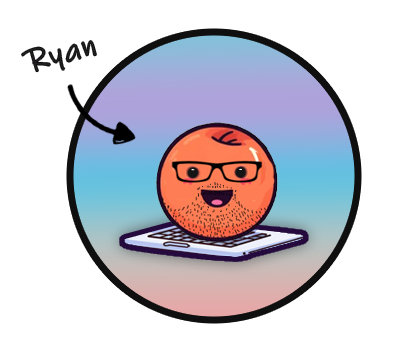
<style>
.page{position:relative;width:413px;height:352px;background:#ffffff}
.page>*{position:absolute;margin:0}
.t1{font:30.7px "InkFree";letter-spacing:0.06em;color:#211f21}
</style>
<div class="page">
<p class="t1" style="left:22px;top:41px;width:74px;height:31px;rotate:-15deg">Ryan</p>
</div>
